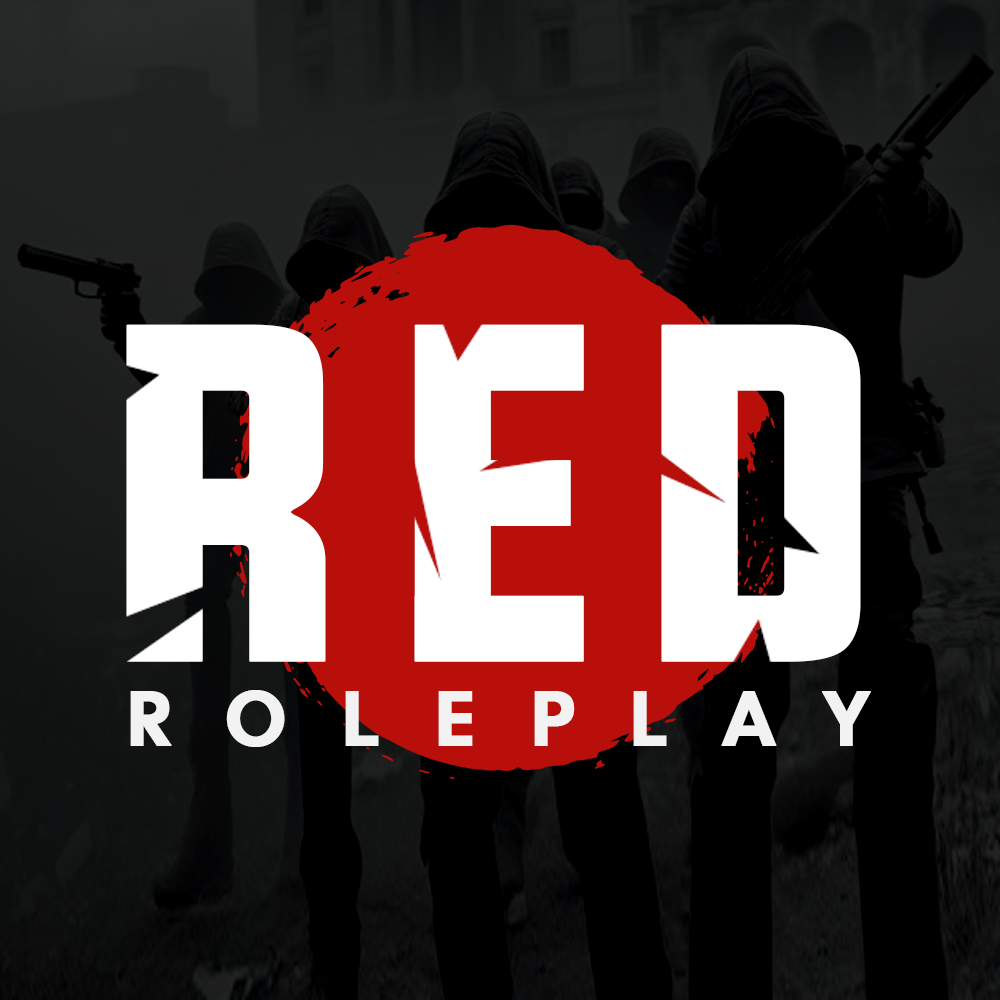
<style>
.page{position:relative;width:1000px;height:1000px}
.page>*{position:absolute;margin:0}
.t1{font:478.9px "UpboltersNew";letter-spacing:0.05em;color:#ffffff;text-transform:uppercase;font-weight:bold}
.t2{font:75.6px "CalSans-Regular";letter-spacing:0.73em;color:#f2f2f2;text-transform:uppercase;font-weight:bold}
</style>
<div class="page">
<p class="t1" style="left:126px;top:324px;width:735px;height:338px">RED</p>
<p class="t2" style="left:130px;top:690px;width:741px;height:57px">ROLEPLAY</p>
</div>
